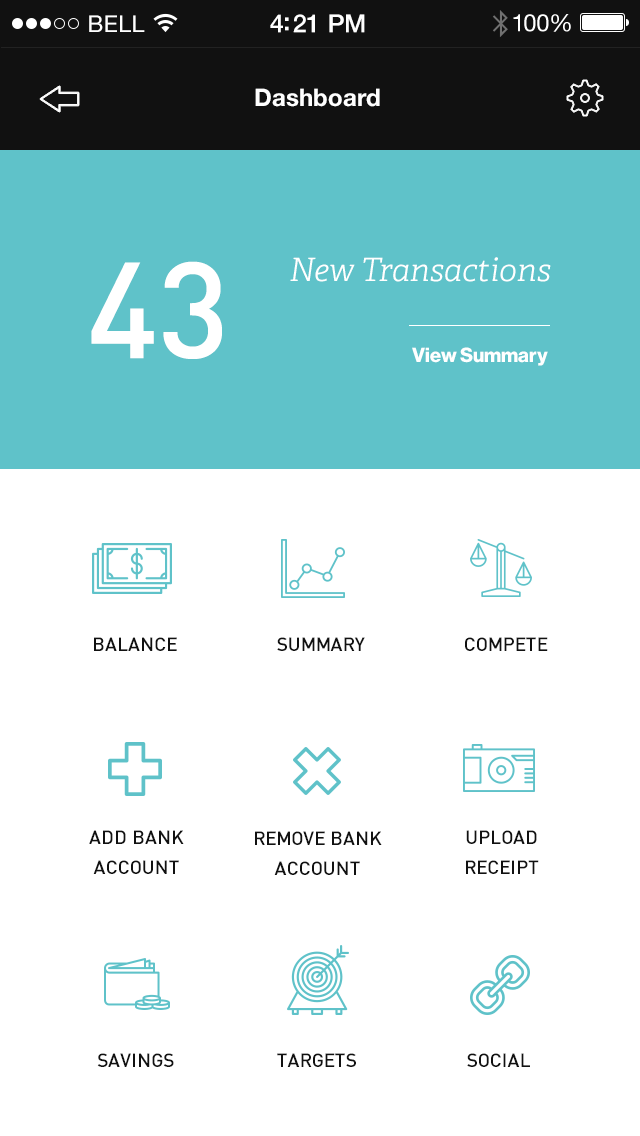
<style>
.page{position:relative;width:640px;height:1136px;background:#ffffff}
.page>*{position:absolute;margin:0}
.t1{font:23px "HelveticaNeue";letter-spacing:0.02em;color:#ffffff}
.t2{font:25px "HelveticaNeue-Medium";letter-spacing:-0.02em;color:#ffffff}
.t3{font:24px "HelveticaNeue";letter-spacing:-0.02em;color:#ffffff}
.t4{font:24px "HelveticaNeue-Bold";color:#ffffff}
.t5{font:32px "Adelle-LightItalic";color:#ffffff}
.t6{font:134px "Dinmed";color:#ffffff;text-transform:uppercase}
.t7{font:20px "HaasGrotDisp-75Bold";color:#ffffff}
.t8{font:19px "Dinmed";color:#111111;text-transform:uppercase}
.t9{font:19px/30px "Dinmed";color:#111111;text-transform:uppercase}
</style>
<div class="page">
<p class="t1" style="left:89px;top:15px;width:56px;height:17px">BELL</p>
<p class="t2" style="left:270px;top:14px;width:95px;height:19px">4:21 PM</p>
<p class="t3" style="left:513px;top:14px;width:58px;height:18px">100%</p>
<p class="t4" style="left:255px;top:88px;width:125px;height:19px">Dashboard</p>
<p class="t5" style="left:290px;top:257px;width:261px;height:25px">New Transactions</p>
<p class="t6" style="left:91px;top:261px;width:131px;height:98px">43</p>
<p class="t7" style="left:412px;top:347px;width:136px;height:19px">View Summary</p>
<p class="t8" style="left:94px;top:637px;width:83px;height:14px">Balance</p>
<p class="t8" style="left:277px;top:637px;width:88px;height:14px">Summary</p>
<p class="t8" style="left:465px;top:637px;width:83px;height:14px">Compete</p>
<p class="t9" style="left:89px;top:830px;width:95px;height:44px;text-align:center">Add Bank<br>Account</p>
<p class="t9" style="left:255px;top:831px;width:127px;height:44px;text-align:center">Remove Bank<br>Account</p>
<p class="t9" style="left:466px;top:830px;width:73px;height:44px;text-align:center">Upload <br>Receipt</p>
<p class="t8" style="left:97px;top:1053px;width:77px;height:14px">Savings</p>
<p class="t8" style="left:277px;top:1053px;width:79px;height:14px">Targets</p>
<p class="t8" style="left:467px;top:1053px;width:63px;height:14px">Social</p>
</div>
